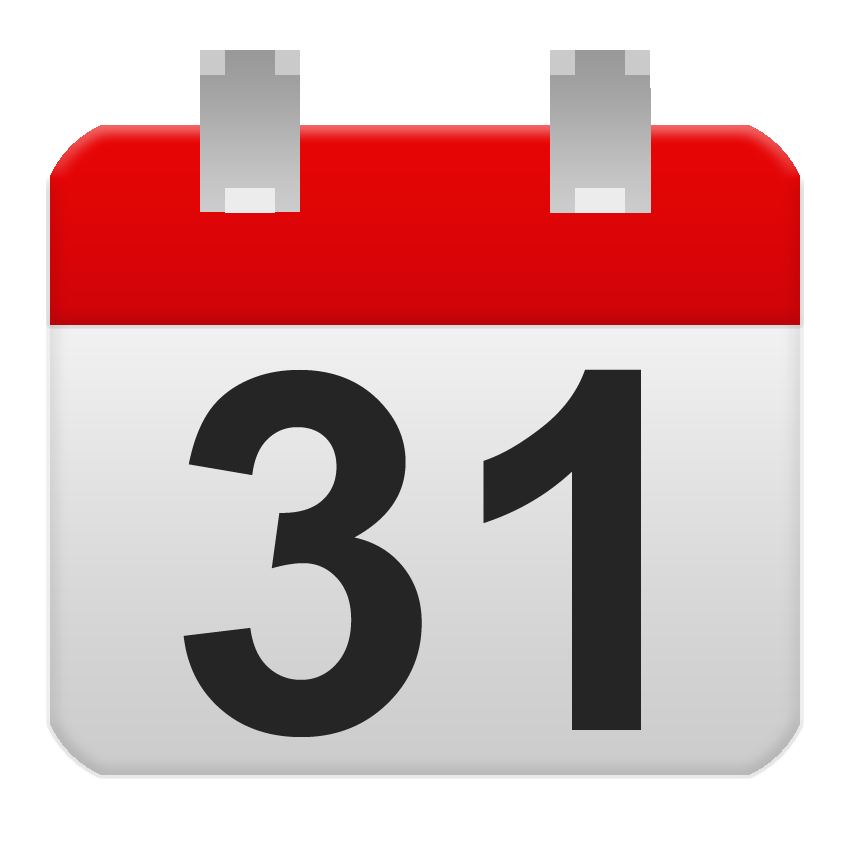
<style>
.page{position:relative;width:850px;height:850px;background:#ffffff}
.page>*{position:absolute;margin:0}
.t1{font:500px "Arial-BoldMT";color:#252525}
</style>
<div class="page">
<p class="t1" style="left:183px;top:369px;width:458px;height:368px">31</p>
</div>
